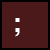
<style>
.page{position:relative;width:50px;height:50px;background:#4b1919}
.page>*{position:absolute;margin:0}
.t1{font:24px "H2gtrE";color:#ffffff}
</style>
<div class="page">
<p class="t1" style="left:15px;top:18px;width:5px;height:19px">;</p>
</div>
